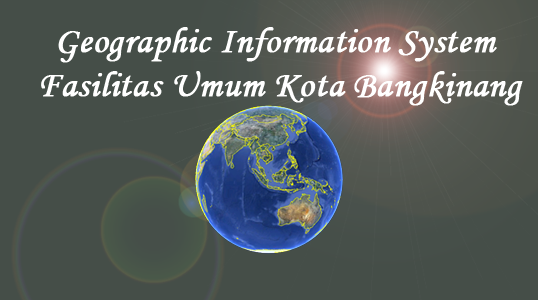
<style>
.page{position:relative;width:538px;height:300px;background:#454e48}
.page>*{position:absolute;margin:0}
.t1{font:36.9px "MonotypeCorsiva";color:#ffffff;font-weight:bold}
</style>
<div class="page">
<p class="t1" style="left:41px;top:27px;width:482px;height:79px;text-align:center">Geographic Information System <br>Fasilitas Umum Kota Bangkinang</p>
</div>
